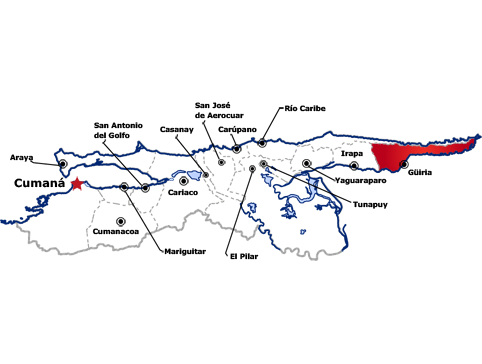
<style>
.page{position:relative;width:482px;height:364px;background:#ffffff}
.page>*{position:absolute;margin:0}
.t1{font:7.2px/10.3px "Verdana-Bold";color:#000000}
.t2{font:7.2px "Verdana-Bold";color:#000000}
.t3{font:11.3px "Verdana-Bold";color:#000000}
</style>
<div class="page">
<p class="t1" style="left:195px;top:101px;width:49px;height:18px">San José <br>de Aerocuar</p>
<p class="t2" style="left:285px;top:104px;width:41px;height:8px">Río Caribe</p>
<p class="t1" style="left:94px;top:122px;width:49px;height:17px">San Antonio <br>del Golfo</p>
<p class="t2" style="left:160px;top:126px;width:34px;height:8px">Casanay</p>
<p class="t2" style="left:218px;top:125px;width:39px;height:9px">Carúpano</p>
<p class="t2" style="left:341px;top:150px;width:22px;height:8px">Irapa</p>
<p class="t2" style="left:10px;top:154px;width:23px;height:8px">Araya</p>
<p class="t2" style="left:408px;top:169px;width:24px;height:7px">Güiria</p>
<p class="t3" style="left:14px;top:177px;width:51px;height:11px">Cumaná</p>
<p class="t2" style="left:335px;top:177px;width:52px;height:8px">Yaguaraparo</p>
<p class="t2" style="left:168px;top:189px;width:30px;height:7px">Cariaco</p>
<p class="t2" style="left:353px;top:201px;width:35px;height:8px">Tunapuy</p>
<p class="t2" style="left:92px;top:228px;width:47px;height:7px">Cumanacoa</p>
<p class="t2" style="left:164px;top:248px;width:42px;height:8px">Mariguitar</p>
<p class="t2" style="left:230px;top:253px;width:29px;height:7px">El Pilar</p>
</div>
